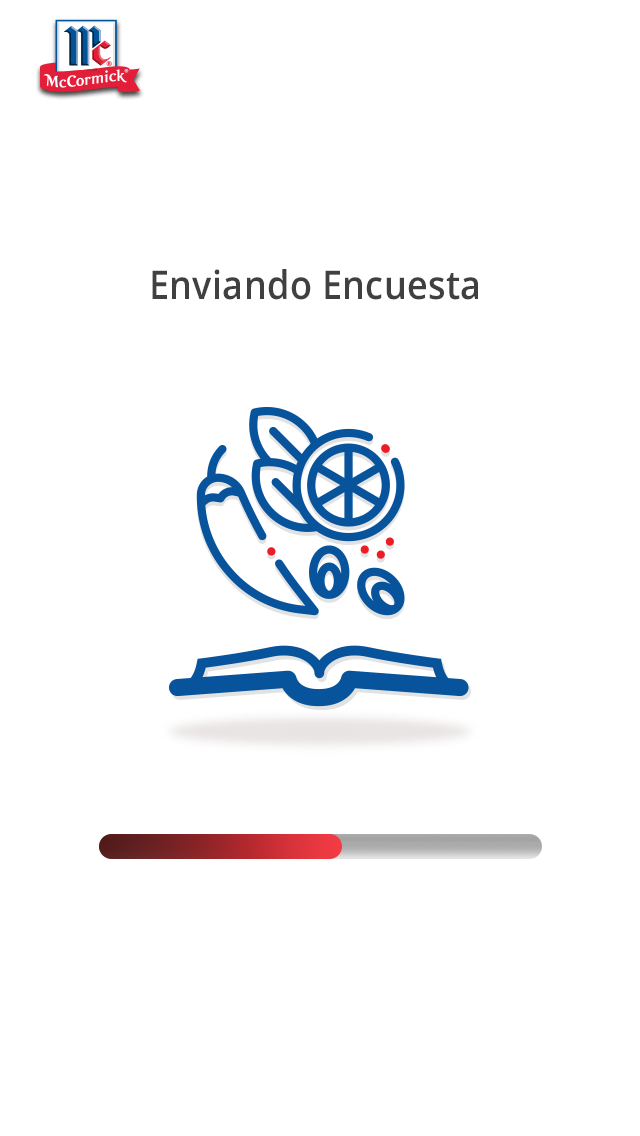
<style>
.page{position:relative;width:640px;height:1136px;background:#ffffff}
.page>*{position:absolute;margin:0}
.t1{font:39.6px "OpenSans-SemiBold";letter-spacing:0.01em;color:#404040;scale:0.91 1}
</style>
<div class="page">
<p class="t1" style="left:152px;top:269px;width:326px;height:31px">Enviando Encuesta</p>
</div>
